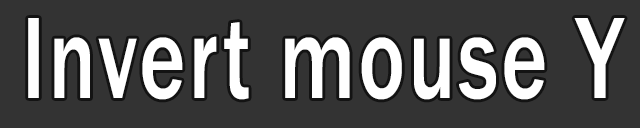
<style>
.page{position:relative;width:640px;height:128px;background:#333333}
.page>*{position:absolute;margin:0}
.t1{font:120px "FranklinGothic-Medium";letter-spacing:0.04em;color:#ffffff;scale:0.72 1}
</style>
<div class="page">
<p class="t1" style="left:28px;top:18px;width:597px;height:82px">Invert mouse Y</p>
</div>
